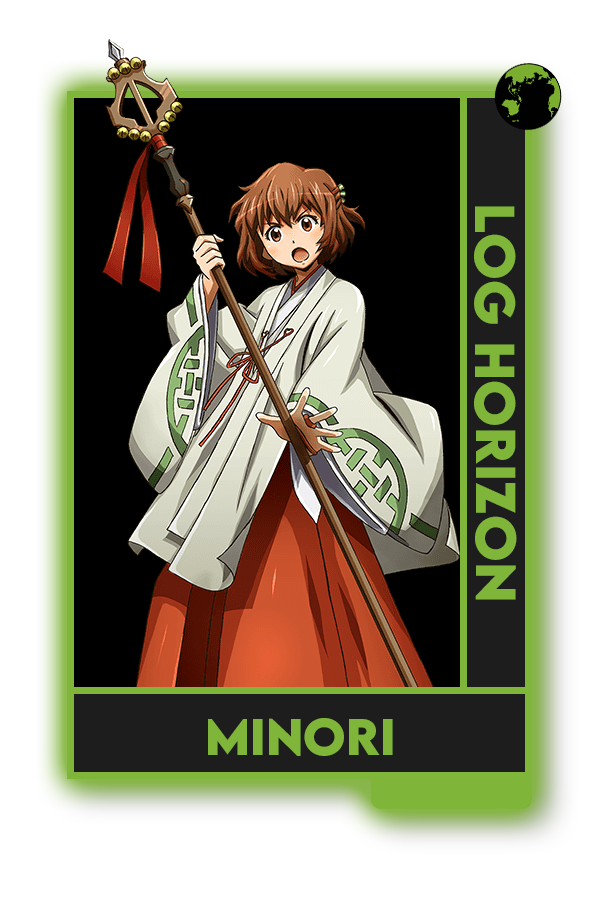
<style>
.page{position:relative;width:600px;height:900px;background:#ffffff}
.page>*{position:absolute;margin:0}
.t1{font:50px "LEMONMILK-Bold";color:#7fad41}
.t2{font:45.8px "LEMONMILK-Bold";color:#7fad41}
</style>
<div class="page">
<p class="t1" style="left:474px;top:206px;width:43px;height:394px;rotate:90deg">Log Horizon</p>
<p class="t2" style="left:208px;top:718px;width:185px;height:38px">Minori</p>
</div>
